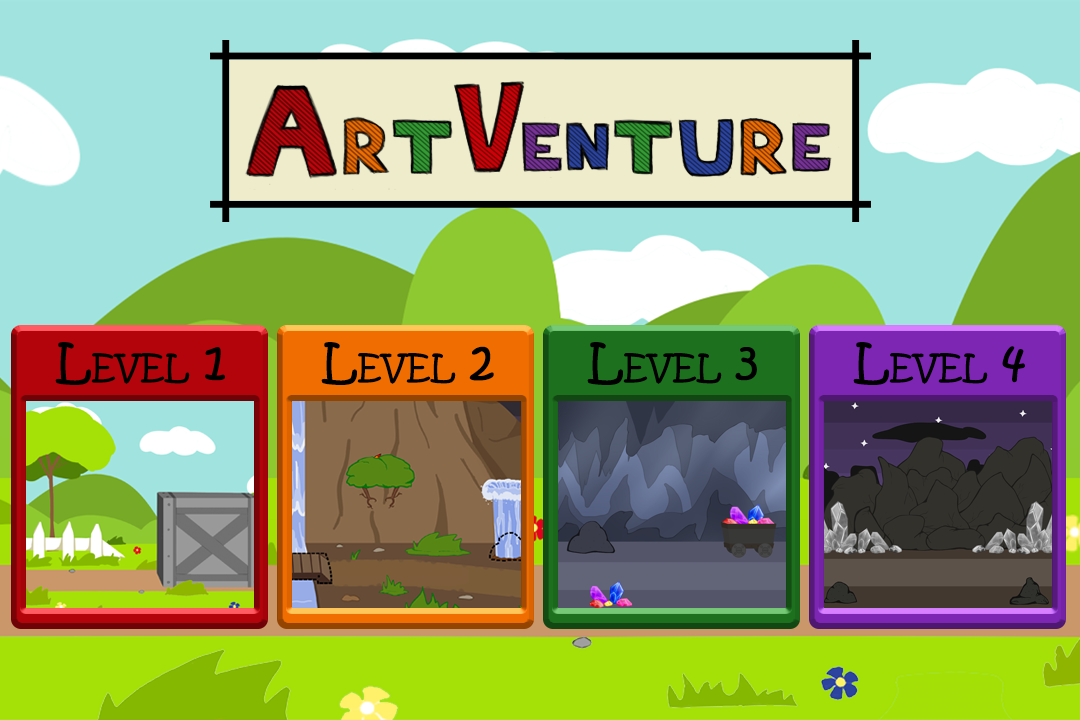
<style>
.page{position:relative;width:1080px;height:720px;background:#a1e4df}
.page>*{position:absolute;margin:0}
.t1{font:48.6px "KristenITC-Regular";color:#000000;font-variant:small-caps}
</style>
<div class="page">
<p class="t1" style="left:55px;top:342px;width:170px;height:43px">Level 1</p>
<p class="t1" style="left:321px;top:342px;width:173px;height:43px">Level 2</p>
<p class="t1" style="left:587px;top:342px;width:170px;height:43px">Level 3</p>
<p class="t1" style="left:853px;top:342px;width:172px;height:43px">Level 4</p>
</div>
